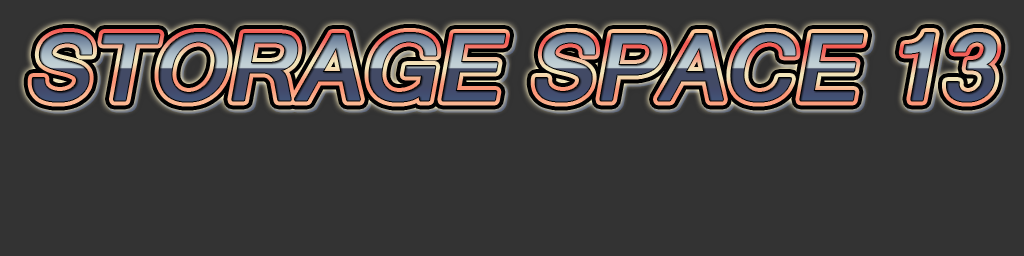
<style>
.page{position:relative;width:1024px;height:256px;background:#333333}
.page>*{position:absolute;margin:0}
.t1{font:155.6px "MicrosoftSansSerif";font-weight:bold;font-style:italic}
</style>
<div class="page">
<p class="t1" style="left:32px;top:33px;width:965px;height:69px">STORAGE SPACE 13</p>
</div>
